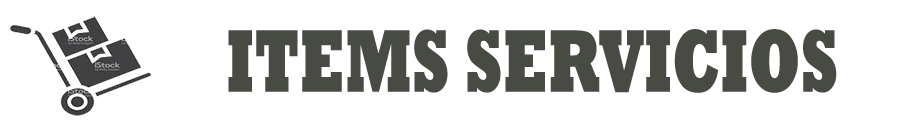
<style>
.page{position:relative;width:916px;height:132px;background:#ffffff}
.page>*{position:absolute;margin:0}
.t1{font:90.1px "Rockwell-ExtraBold";color:#484a44;scale:0.67 1}
</style>
<div class="page">
<p class="t1" style="left:228px;top:29px;width:609px;height:64px">ITEMS SERVICIOS</p>
</div>
